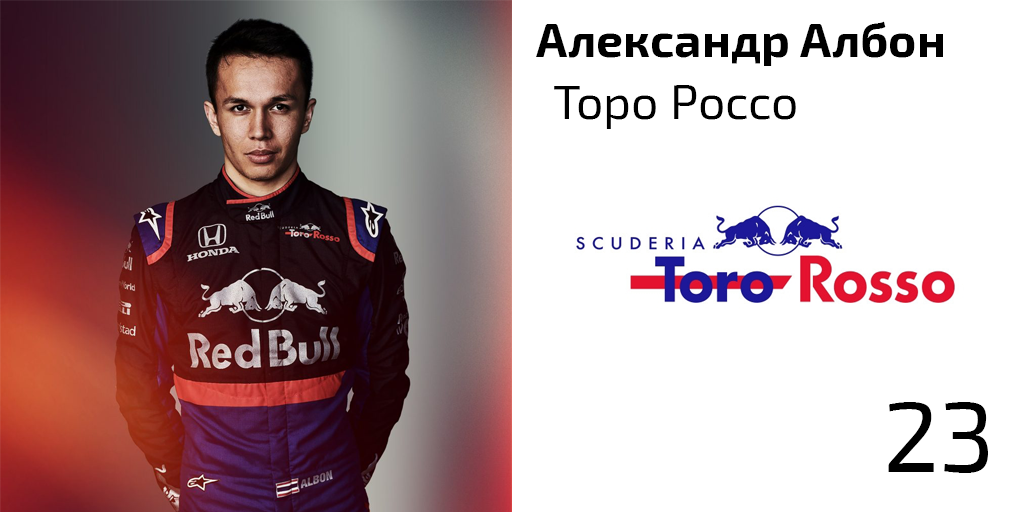
<style>
.page{position:relative;width:1024px;height:512px;background:#ffffff}
.page>*{position:absolute;margin:0}
.t1{font:48px "Exo2-Bold";color:#000000}
.t2{font:48px "Exo2-Regular";color:#000000}
.t3{font:100px "Exo2-Regular";color:#000000}
</style>
<div class="page">
<p class="t1" style="left:536px;top:21px;width:407px;height:45px">Александр Албон</p>
<p class="t2" style="left:554px;top:85px;width:242px;height:44px">Торо Россо</p>
<p class="t3" style="left:888px;top:402px;width:100px;height:71px">23</p>
</div>
